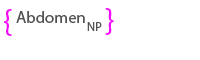
<style>
.page{position:relative;width:200px;height:60px;background:#ffffff}
.page>*{position:absolute;margin:0}
.t1{font:33.3px "MyriadPro-Regular";color:#f30df6}
.t2{font:16.7px "MyriadPro-Regular";color:#525252}
.t3{font:12.5px "MyriadPro-Regular";color:#525252}
</style>
<div class="page">
<p class="t1" style="left:4px;top:9px;width:8px;height:27px">{</p>
<p class="t2" style="left:16px;top:11px;width:69px;height:12px">Abdomen</p>
<p class="t1" style="left:105px;top:8px;width:9px;height:27px">}</p>
<p class="t3" style="left:87px;top:22px;width:15px;height:9px">NP</p>
</div>
